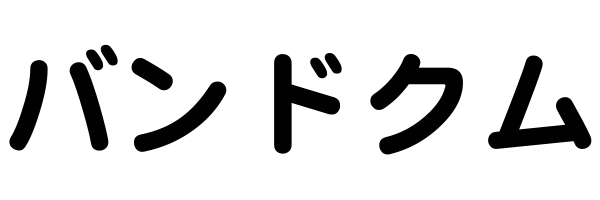
<style>
.page{position:relative;width:600px;height:200px;background:#ffffff}
.page>*{position:absolute;margin:0}
.t1{font:120px "DFMaruGothic-SB-MP-RKSJ-H";color:#010101}
</style>
<div class="page">
<p class="t1" style="left:9px;top:44px;width:583px;height:111px">バンドクム</p>
</div>
